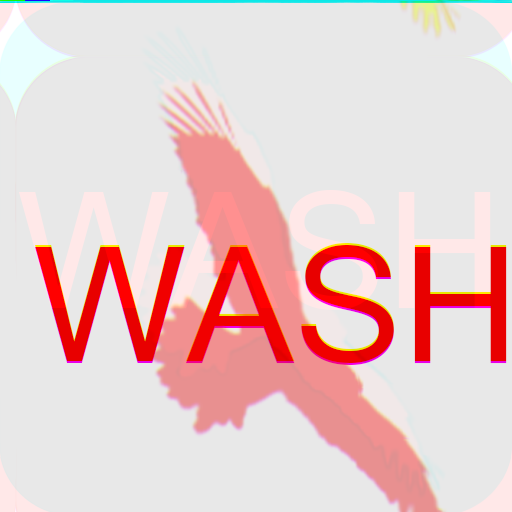
<style>
.page{position:relative;width:512px;height:512px;background:#e8e8e8}
.page>*{position:absolute;margin:0}
.t1{font:180px "Latha"}
</style>
<div class="page">
<p class="t1" style="left:19px;top:187px;width:472px;height:120px">WASH</p>
</div>
